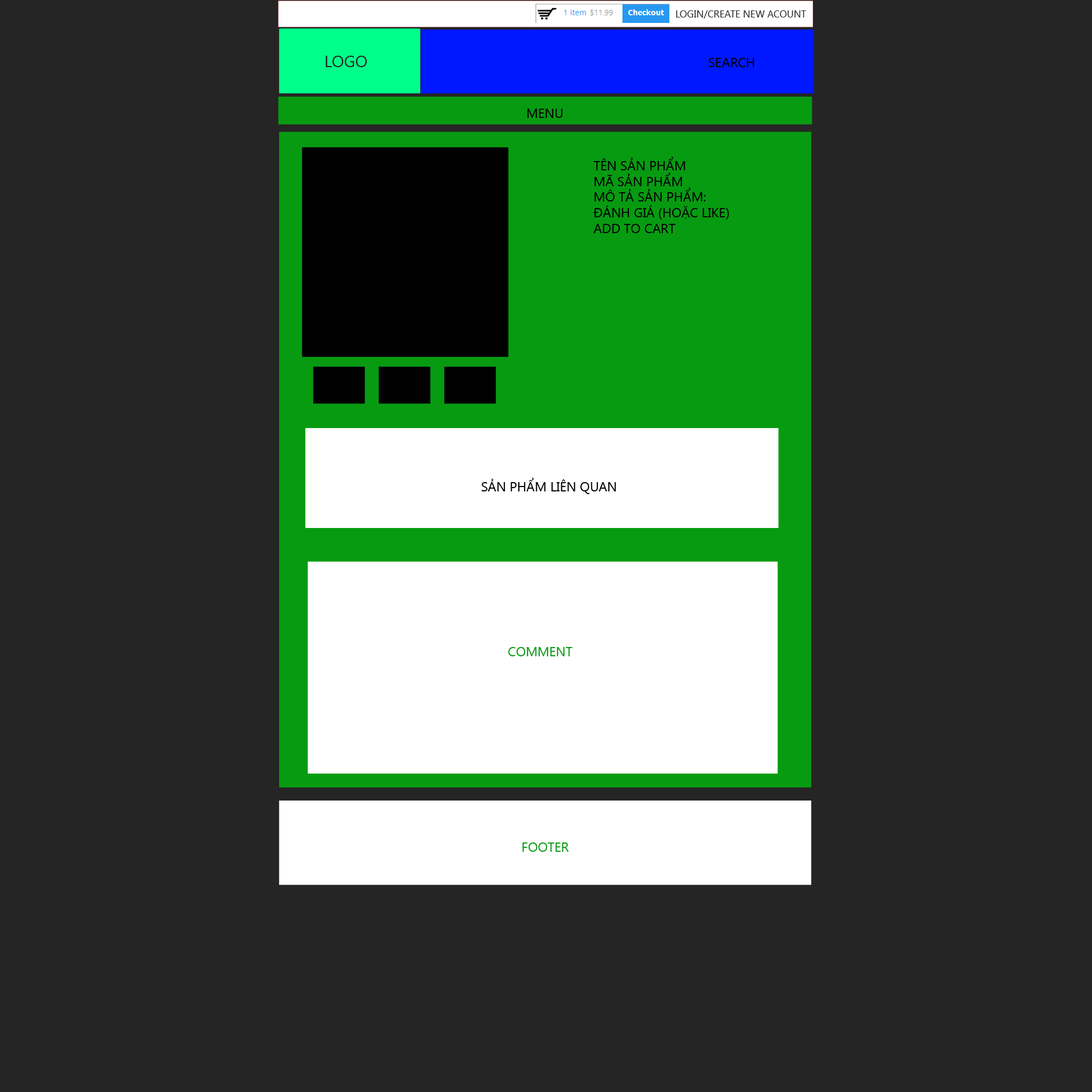
<style>
.page{position:relative;width:1092px;height:1092px;background:#252525}
.page>*{position:absolute;margin:0}
.t1{font:9.8px "SegoeUI";color:#252525;text-transform:uppercase}
.t2{font:16.4px "SegoeUI";color:#252525;text-transform:uppercase}
.t3{font:13.1px "SegoeUI";color:#000000;text-transform:uppercase}
.t4{font:13.1px "SegoeUI";color:#079b11;text-transform:uppercase}
</style>
<div class="page">
<p class="t1" style="left:676px;top:10px;width:130px;height:9px">login/create new acount</p>
<p class="t2" style="left:325px;top:56px;width:42px;height:11px">Logo</p>
<p class="t3" style="left:709px;top:58px;width:45px;height:9px">search</p>
<p class="t3" style="left:527px;top:109px;width:36px;height:9px">menu</p>
<p class="t3" style="left:593px;top:157px;width:136px;height:76px">Tên sản phẩm<br>mã sản phẩm<br>mô tả sản phẩm:<br>đánh giá (hoặc like)<br>add to cart</p>
<p class="t3" style="left:482px;top:478px;width:134px;height:16px">Sản phẩm liên quan</p>
<p class="t4" style="left:508px;top:647px;width:65px;height:9px">Comment</p>
<p class="t4" style="left:523px;top:842px;width:46px;height:10px">Footer</p>
</div>
